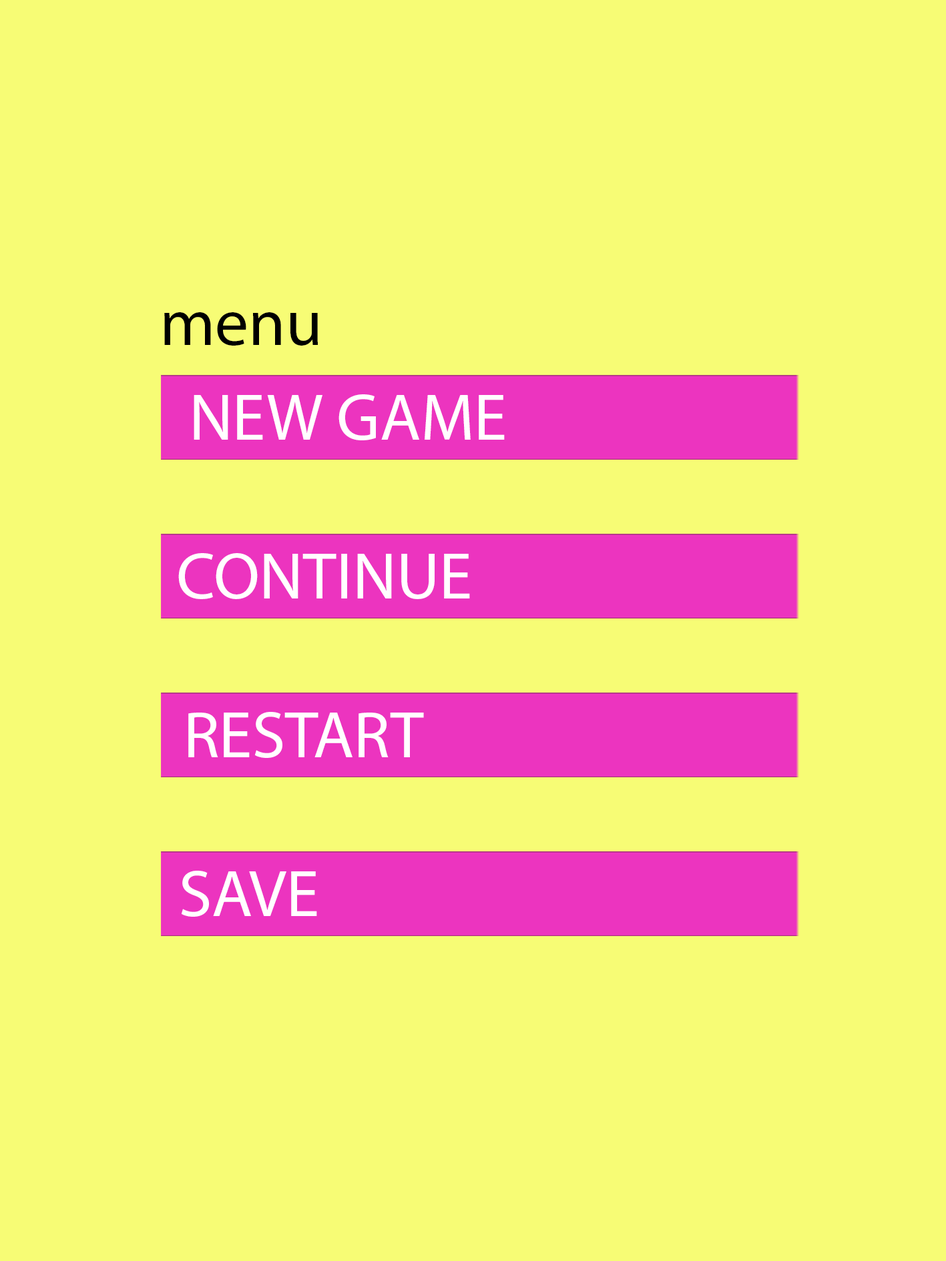
<style>
.page{position:relative;width:946px;height:1261px;background:#f7fc75}
.page>*{position:absolute;margin:0}
.t1{font:66.7px "MyriadPro-Regular";color:#000000}
.t2{font:66.7px "MyriadPro-Regular";color:#ffffff}
</style>
<div class="page">
<p class="t1" style="left:164px;top:312px;width:154px;height:34px">menu</p>
<p class="t2" style="left:194px;top:394px;width:310px;height:46px">NEW GAME</p>
<p class="t2" style="left:178px;top:553px;width:292px;height:46px">CONTINUE</p>
<p class="t2" style="left:188px;top:712px;width:236px;height:46px">RESTART</p>
<p class="t2" style="left:181px;top:871px;width:136px;height:46px">SAVE</p>
</div>
